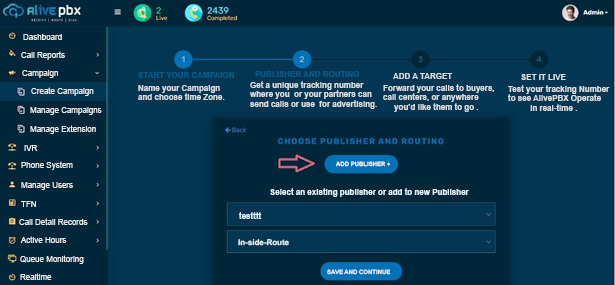
<style>
.page{position:relative;width:615px;height:285px;background:#033653}
.page>*{position:absolute;margin:0}
.t1{font:8px "ArialMT";color:#e8ebed}
.t2{font:8px "Arial-BoldMT";color:#0b5989}
.t3{font:8px "Arial-BoldMT";color:#d8dcde}
.t4{font:8px/9.3px "Arial-BoldMT";color:#d8dcde}
.t5{font:6px "Arial-BoldMT";color:#f1f5f8}
.t6{font:8px "Arial-BoldMT";color:#e2f2fc}
.t7{font:6px "Arial-BoldMT";color:#ebf0f3}
</style>
<div class="page">
<p class="t1" style="left:23px;top:34px;width:39px;height:6px">Dashboard</p>
<p class="t1" style="left:21px;top:51px;width:44px;height:9px">Call Reports</p>
<p class="t1" style="left:22px;top:70px;width:36px;height:8px">Campaign</p>
<p class="t2" style="left:138px;top:72px;width:96px;height:6px">START YOUR CAMPAIGN</p>
<p class="t2" style="left:255px;top:71px;width:105px;height:6px">PUBLISHER AND ROUTING</p>
<p class="t3" style="left:393px;top:73px;width:60px;height:6px">ADD A TARGET</p>
<p class="t3" style="left:521px;top:74px;width:45px;height:6px">SET IT LIVE</p>
<p class="t1" style="left:31px;top:87px;width:63px;height:9px">Create Campaign</p>
<p class="t4" style="left:138px;top:85px;width:87px;height:15px">Name your Campaign <br>and choose time Zone.</p>
<p class="t4" style="left:250px;top:81px;width:127px;height:28px">Get a unique tracking number <br>where you  or your partners can <br>send calls or use  for advertising.</p>
<p class="t4" style="left:383px;top:84px;width:111px;height:28px">Forward your calls to buyers, <br>call centers, or anywhere <br>     you’d like them to go .</p>
<p class="t4" style="left:508px;top:85px;width:102px;height:26px">Test your tracking Number <br>to see AlivePBX Operate <br>          in real-time .</p>
<p class="t1" style="left:30px;top:107px;width:72px;height:8px">Manage Campaigns</p>
<p class="t1" style="left:30px;top:125px;width:66px;height:9px">Manage Extension</p>
<p class="t1" style="left:24px;top:145px;width:14px;height:6px">IVR</p>
<p class="t1" style="left:21px;top:161px;width:52px;height:9px">Phone System</p>
<p class="t5" style="left:336px;top:161px;width:55px;height:6px">ADD PUBLISHER +</p>
<p class="t1" style="left:21px;top:182px;width:52px;height:8px">Manage Users</p>
<p class="t6" style="left:270px;top:188px;width:199px;height:9px">Select an existing publisher or add to new Publisher</p>
<p class="t1" style="left:21px;top:201px;width:15px;height:6px">TFN</p>
<p class="t1" style="left:19px;top:218px;width:69px;height:7px">Call Detail Records</p>
<p class="t6" style="left:239px;top:212px;width:23px;height:7px">testttt</p>
<p class="t1" style="left:20px;top:236px;width:47px;height:7px">Active Hours</p>
<p class="t6" style="left:238px;top:239px;width:51px;height:7px;rotate:1deg">In-side-Route</p>
<p class="t1" style="left:20px;top:255px;width:64px;height:9px">Queue Monitoring</p>
<p class="t7" style="left:327px;top:269px;width:64px;height:6px">SAVE AND CONTINUE</p>
<p class="t1" style="left:20px;top:273px;width:32px;height:7px">Realtime</p>
</div>
